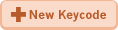
<style>
.page{position:relative;width:118px;height:30px;background:#fadbca}
.page>*{position:absolute;margin:0}
.t1{font:12px "NewsGothic-Bold";color:#b85b2a}
</style>
<div class="page">
<p class="t1" style="left:29px;top:10px;width:77px;height:12px">New Keycode</p>
</div>
